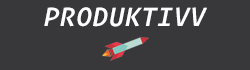
<style>
.page{position:relative;width:250px;height:70px;background:#38383a}
.page>*{position:absolute;margin:0}
.t1{font:29.6px "OperatorMono-MediumItalic";color:#ffffff}
.t2{font:29.6px "OperatorMono-MediumItalic";letter-spacing:0.025em;color:#ffffff}
</style>
<div class="page">
<p class="t1" style="left:44px;top:7px;width:163px;height:20px">PRODUKTIV<span class="t2">V</span></p>
</div>
